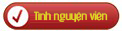
<style>
.page{position:relative;width:122px;height:31px}
.page>*{position:absolute;margin:0}
.t1{font:11.4px "UTM-Libel-KT";letter-spacing:-0.025em;color:#dfd424;scale:1.58 1}
</style>
<div class="page">
<p class="t1" style="left:34px;top:11px;width:74px;height:11px">Tình nguyện viên</p>
</div>
